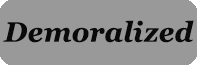
<style>
.page{position:relative;width:197px;height:65px;background:#999999}
.page>*{position:absolute;margin:0}
.t1{font:27.8px "Georgia-BoldItalic";letter-spacing:0.025em;color:#000000}
</style>
<div class="page">
<p class="t1" style="left:3px;top:20px;width:191px;height:23px;opacity:0.95">Demoralized</p>
</div>
